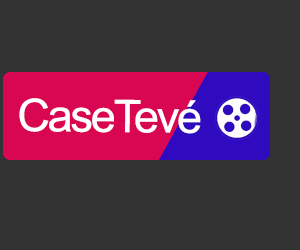
<style>
.page{position:relative;width:300px;height:250px;background:#333333}
.page>*{position:absolute;margin:0}
.t1{font:44.9px "ArialMT";letter-spacing:-0.05em;color:#ffffff}
</style>
<div class="page">
<p class="t1" style="left:19px;top:98px;width:182px;height:36px;rotate:1deg">CaseTevé</p>
</div>
